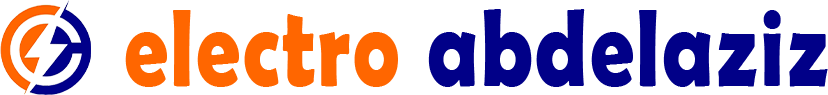
<style>
.page{position:relative;width:828px;height:95px;background:#ffffff}
.page>*{position:absolute;margin:0}
.t1{font:110.5px "BerlinSansFBDemi-Bold";letter-spacing:0.026em;color:#010088;scale:0.8 1}
.t2{font:110.5px "BerlinSansFBDemi-Bold";letter-spacing:0.026em;color:#ff6600;scale:0.8 1}
</style>
<div class="page">
<p class="t1" style="left:125px;top:9px;width:703px;height:78px"><span class="t2">electro </span>abdelaziz</p>
</div>
